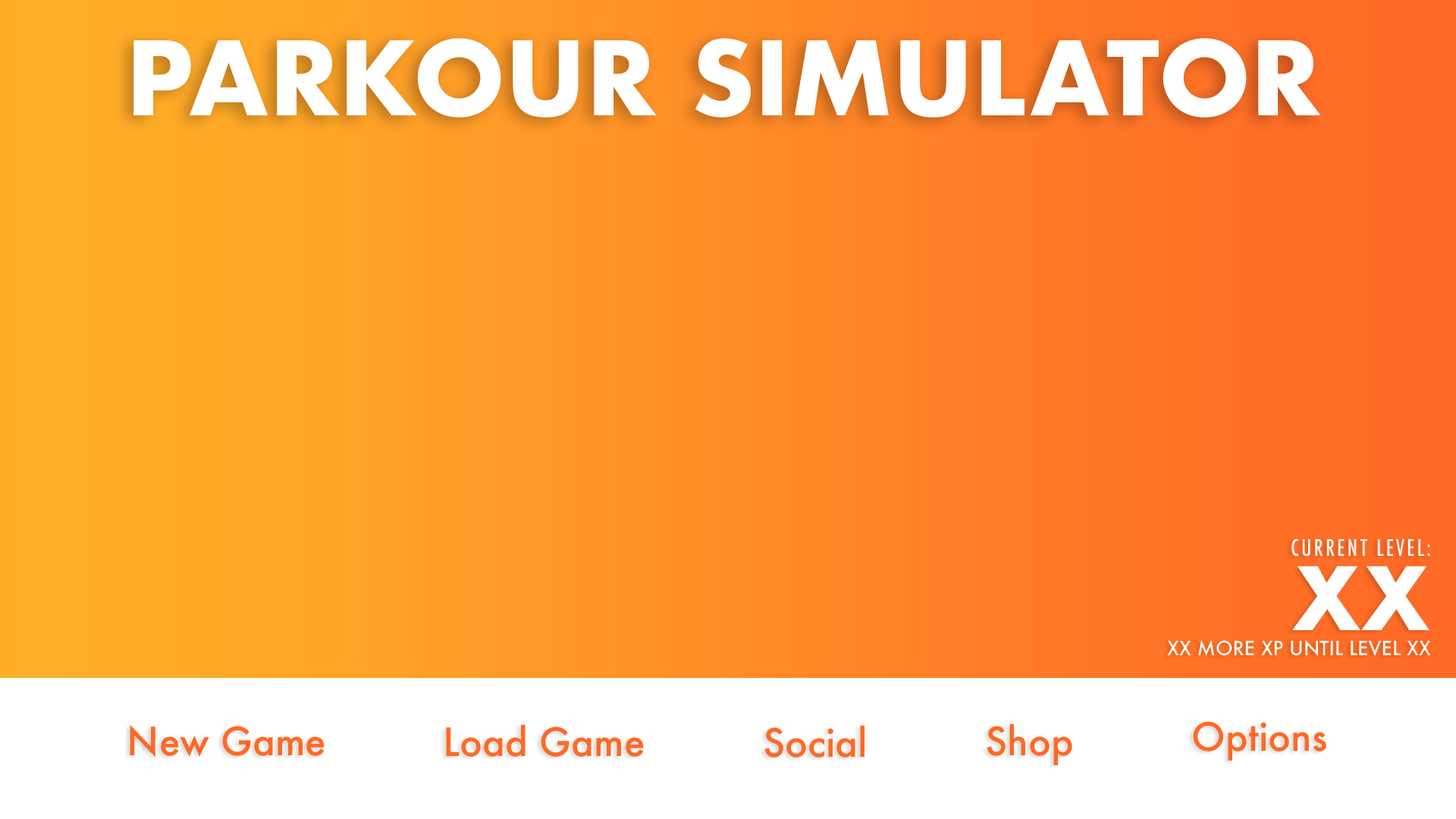
<style>
.page{position:relative;width:1456px;height:819px}
.page>*{position:absolute;margin:0}
.t1{font:99.4px "Futura-Bold";color:#ffffff}
.t2{font:22.3px "Futura-CondensedMedium";letter-spacing:0.1em;color:#ffffff}
.t3{font:85.2px "Futura-Bold";color:#ffffff}
.t4{font:19.2px "Futura-Medium";color:#ffffff}
.t5{font:37.9px "Futura-Medium";color:#ff6925}
</style>
<div class="page">
<p class="t1" style="left:133px;top:38px;width:1188px;height:80px">PARKOUR SIMULATOR</p>
<p class="t2" style="left:1291px;top:538px;width:139px;height:19px">CURRENT LEVEL:</p>
<p class="t3" style="left:1292px;top:566px;width:138px;height:64px">XX</p>
<p class="t4" style="left:1167px;top:639px;width:264px;height:18px">XX MORE XP UNTIL LEVEL XX</p>
<p class="t5" style="left:130px;top:724px;width:195px;height:34px">New Game</p>
<p class="t5" style="left:446px;top:724px;width:198px;height:33px">Load Game</p>
<p class="t5" style="left:764px;top:725px;width:100px;height:33px">Social</p>
<p class="t5" style="left:987px;top:723px;width:85px;height:42px">Shop</p>
<p class="t5" style="left:1193px;top:721px;width:133px;height:40px">Options</p>
</div>
